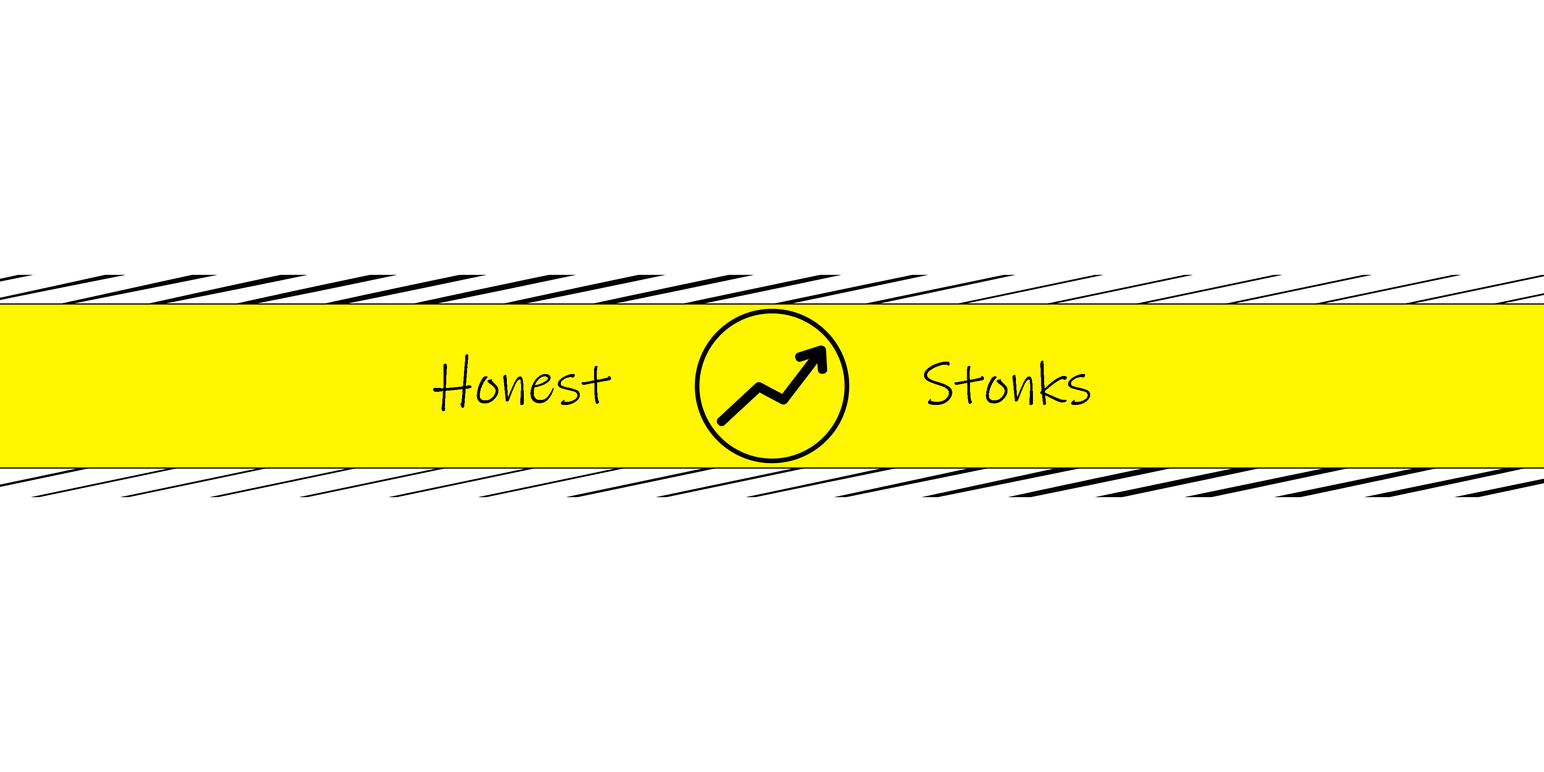
<style>
.page{position:relative;width:1544px;height:772px;background:#ffffff}
.page>*{position:absolute;margin:0}
.t1{font:59.5px "InkFree";color:#000000}
</style>
<div class="page">
<p class="t1" style="left:433px;top:354px;width:178px;height:58px">Honest</p>
<p class="t1" style="left:924px;top:361px;width:166px;height:44px">Stonks</p>
</div>
